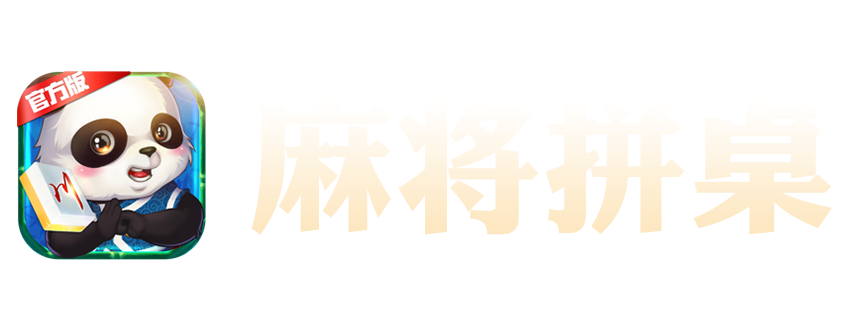
<style>
.page{position:relative;width:849px;height:325px;background:#ffffff}
.page>*{position:absolute;margin:0}
.t1{font:147px "DFPLiJinHeiW8"}
</style>
<div class="page">
<p class="t1" style="left:251px;top:94px;width:581px;height:141px">麻将拼桌</p>
</div>
